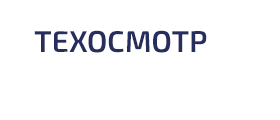
<style>
.page{position:relative;width:280px;height:120px;background:#ffffff}
.page>*{position:absolute;margin:0}
.t1{font:30px "Exo2.0-SemiBold";color:#252e5c}
</style>
<div class="page">
<p class="t1" style="left:34px;top:30px;width:173px;height:23px">ТЕХОСМОТР</p>
</div>
